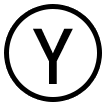
<style>
.page{position:relative;width:105px;height:105px;background:#ffffff}
.page>*{position:absolute;margin:0}
.t1{font:77.8px "DINAlternate-Bold";color:#000000}
</style>
<div class="page">
<p class="t1" style="left:33px;top:28px;width:40px;height:56px">Y</p>
</div>
